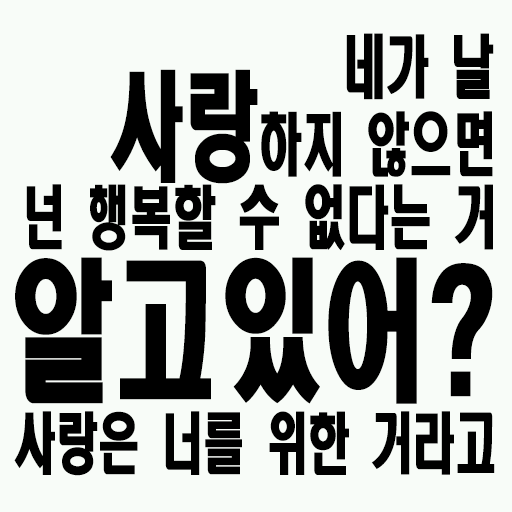
<style>
.page{position:relative;width:512px;height:512px;background:#f8fcf8}
.page>*{position:absolute;margin:0}
.t1{font:68.4px "HeadlineR-HM";color:#000000;scale:0.63 1}
.t2{font:117.8px "HeadlineR-HM";color:#000000;scale:0.63 1}
.t3{font:152px "HeadlineR-HM";color:#000000;scale:0.68 1}
.t4{font:66.5px "HeadlineR-HM";color:#000000;scale:0.63 1}
</style>
<div class="page">
<p class="t1" style="left:346px;top:33px;width:148px;height:67px">네가 날</p>
<p class="t1" style="left:110px;top:69px;width:383px;height:115px"><span class="t2">사랑</span>하지 않으면</p>
<p class="t1" style="left:26px;top:184px;width:467px;height:67px">넌 행복할 수 없다는 거</p>
<p class="t3" style="left:15px;top:257px;width:478px;height:147px">알고있어?</p>
<p class="t4" style="left:14px;top:411px;width:481px;height:65px">사랑은 너를 위한 거라고</p>
</div>
